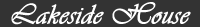
<style>
.page{position:relative;width:200px;height:27px;background:#333333}
.page>*{position:absolute;margin:0}
.t1{font:28.6px "Vivaldii";color:#ffffff;font-weight:bold}
</style>
<div class="page">
<p class="t1" style="left:11px;top:2px;width:180px;height:23px">Lakeside House</p>
</div>
